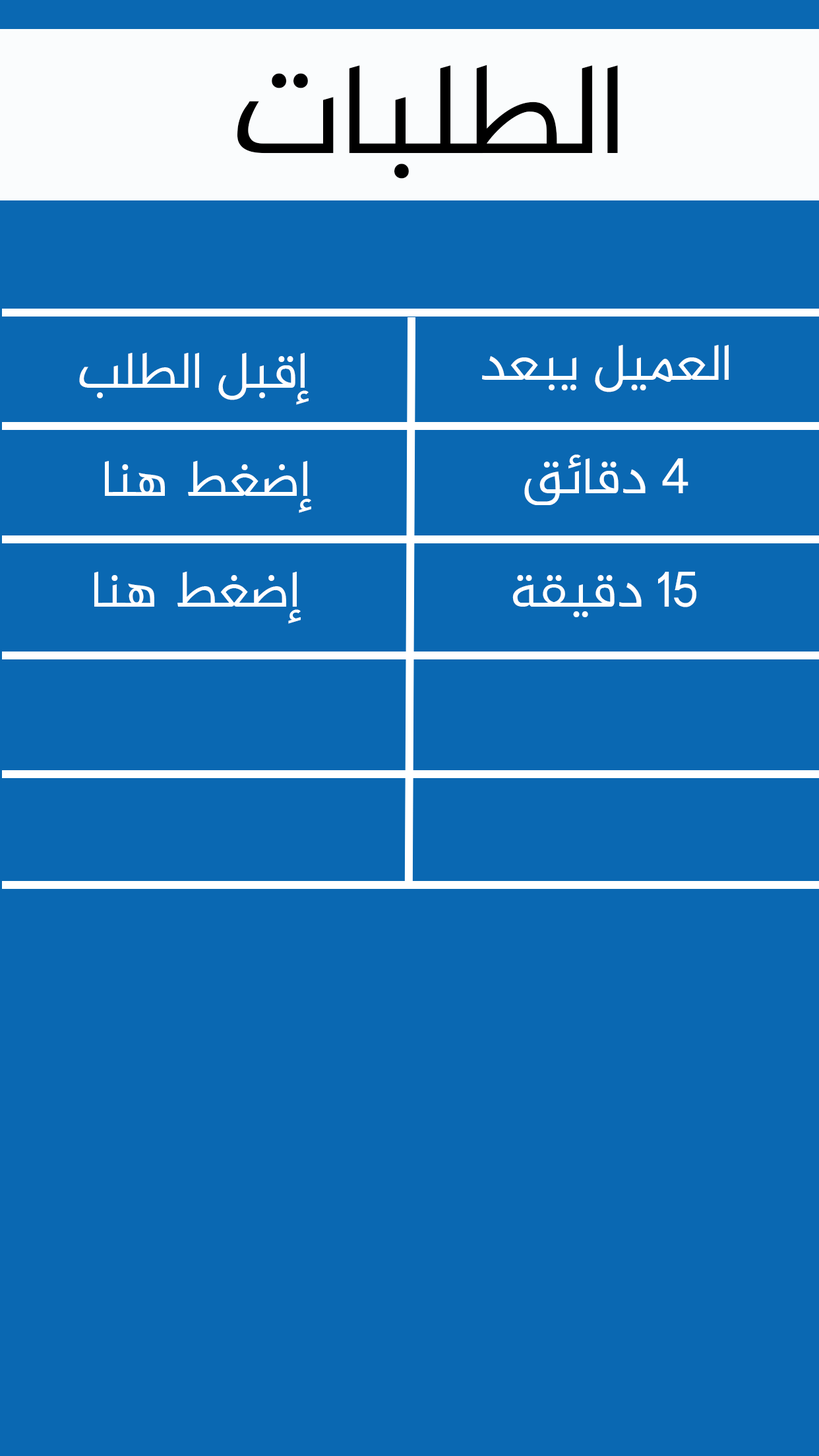
<style>
.page{position:relative;width:819px;height:1456px;background:#0a68b2}
.page>*{position:absolute;margin:0}
.t1{font:131.9px "Al-Jazeera-Arabic-Regular";color:#000000}
.t2{font:52.8px "Al-Jazeera-Arabic-Regular";color:#ffffff}
</style>
<div class="page">
<p class="t1" style="left:237px;top:65px;width:381px;height:114px">الطلبات</p>
<p class="t2" style="left:79px;top:352px;width:230px;height:53px">إقبل الطلب</p>
<p class="t2" style="left:482px;top:345px;width:247px;height:47px">العميل يبعد</p>
<p class="t2" style="left:105px;top:460px;width:206px;height:53px">إضغط هنا</p>
<p class="t2" style="left:524px;top:454px;width:164px;height:51px">4 دقائق</p>
<p class="t2" style="left:94px;top:571px;width:207px;height:53px">إضغط هنا</p>
<p class="t2" style="left:512px;top:572px;width:184px;height:45px">15 دقيقة</p>
</div>
